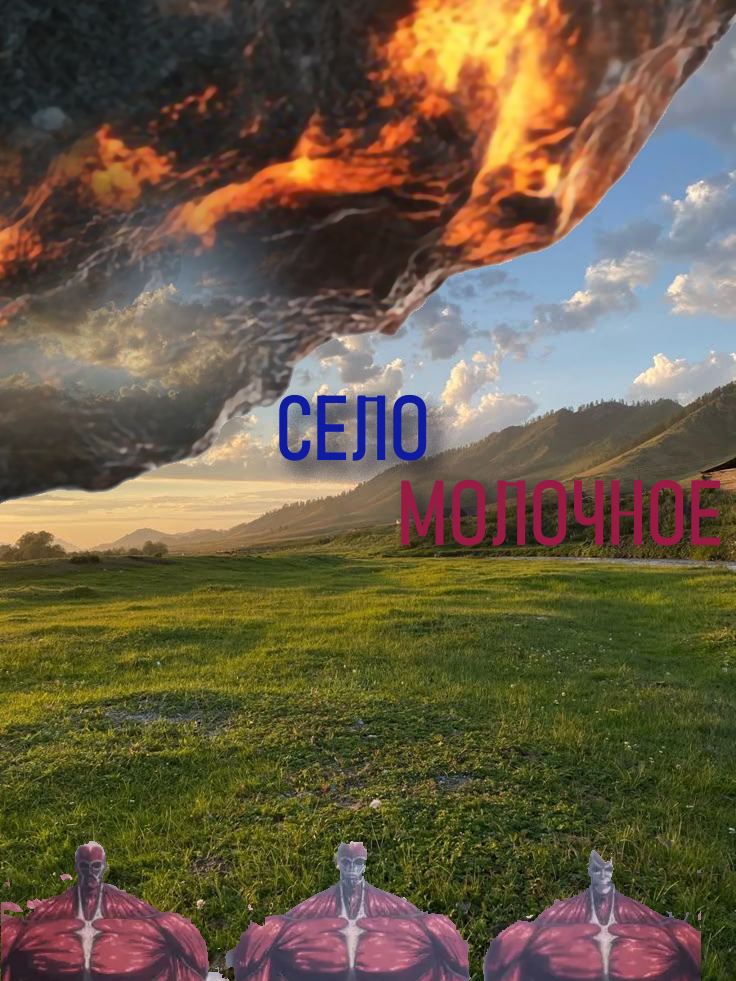
<style>
.page{position:relative;width:736px;height:981px}
.page>*{position:absolute;margin:0}
.t1{font:89.6px "Bahnschrift";color:#0f1ba1;font-weight:bold}
.t2{font:89.6px "Bahnschrift";color:#971b42;font-weight:bold}
</style>
<div class="page">
<p class="t1" style="left:279px;top:394px;width:148px;height:67px">СЕЛО</p>
<p class="t2" style="left:401px;top:479px;width:319px;height:67px">МОЛОЧНОЕ</p>
</div>
